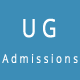
<style>
.page{position:relative;width:80px;height:80px;background:#3c8db7}
.page>*{position:absolute;margin:0}
.t1{font:25px "OpenSans";letter-spacing:0.261em;color:#ffffff;font-weight:bold;scale:0.8 1}
.t2{font:11.9px "OpenSans";letter-spacing:0.261em;color:#fefeff;font-weight:bold;scale:0.8 1}
</style>
<div class="page">
<p class="t1" style="left:23px;top:18px;width:33px;height:20px">UG</p>
<p class="t2" style="left:2px;top:53px;width:76px;height:10px">Admissions</p>
</div>
